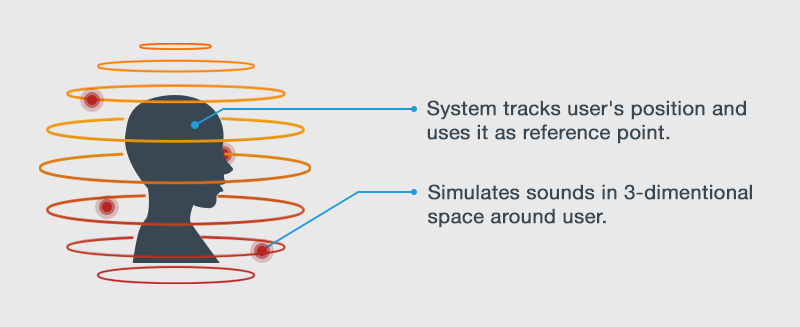
<style>
.page{position:relative;width:800px;height:327px;background:#e9e9e9}
.page>*{position:absolute;margin:0}
.t1{font:20px "HelveticaNeue";color:#384752;font-weight:bold}
</style>
<div class="page">
<p class="t1" style="left:427px;top:100px;width:319px;height:44px">System tracks user's position and<br>uses it as reference point.</p>
<p class="t1" style="left:428px;top:184px;width:324px;height:44px">Simulates sounds in 3-dimentional<br>space around user.</p>
</div>
